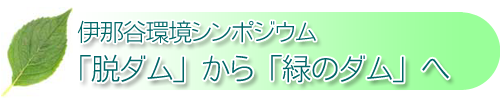
<style>
.page{position:relative;width:500px;height:100px;background:#ffffff}
.page>*{position:absolute;margin:0}
.t1{font:24px "NfMotoyaCedar-W1-90mskp-RKSJ-H";letter-spacing:-0.05em;color:#006666}
.t2{font:30px "NfMotoyaCedar-W1-90mskp-RKSJ-H";letter-spacing:-0.05em;color:#006666}
</style>
<div class="page">
<p class="t1" style="left:77px;top:20px;width:239px;height:23px">伊那谷環境シンポジウム</p>
<p class="t2" style="left:80px;top:54px;width:369px;height:29px">「脱ダム」から「緑のダム」へ</p>
</div>
